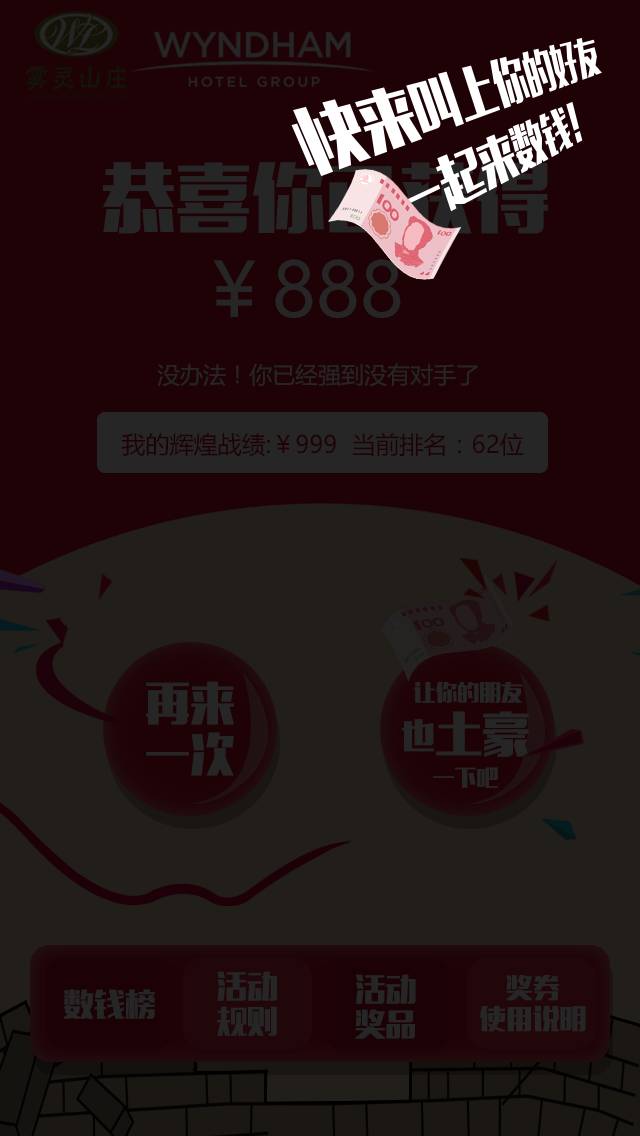
<style>
.page{position:relative;width:640px;height:1136px;background:#1f0206}
.page>*{position:absolute;margin:0}
.t1{font:74.8px "MicrosoftYaHei";color:#262626}
.t2{font:23px "MicrosoftYaHei";color:#262626}
.t3{font:24px "MicrosoftYaHei";color:#1f0206}
.t4{font:45.3px/51.4px "MFLiHei_Noncommercial-Regular";color:#262626}
.t5{font:21.8px "MFLiHei_Noncommercial-Regular";color:#262626}
.t6{font:47.8px "MFLiHei_Noncommercial-Regular";color:#262626}
.t7{font:33.6px "MFLiHei_Noncommercial-Regular";color:#262626}
.t8{font:30.7px/35px "MFLiHei_Noncommercial-Regular";color:#262626}
.t9{font:26.8px/30.5px "MFLiHei_Noncommercial-Regular";color:#262626}
.t10{font:30.7px "MFLiHei_Noncommercial-Regular";color:#262626}
</style>
<div class="page">
<p class="t1" style="left:213px;top:259px;width:188px;height:59px">￥888</p>
<p class="t2" style="left:157px;top:363px;width:321px;height:24px">没办法！你已经强到没有对手了</p>
<p class="t3" style="left:121px;top:432px;width:403px;height:25px">我的辉煌战绩:￥999  当前排名：62位</p>
<p class="t4" style="left:146px;top:681px;width:88px;height:95px">再来<br>一次</p>
<p class="t5" style="left:414px;top:682px;width:109px;height:21px">让你的朋友</p>
<p class="t6" style="left:436px;top:711px;width:93px;height:46px">土豪</p>
<p class="t7" style="left:402px;top:719px;width:32px;height:33px">也</p>
<p class="t5" style="left:433px;top:767px;width:65px;height:21px">一下吧</p>
<p class="t8" style="left:217px;top:971px;width:60px;height:65px;text-align:center">活动<br>规则</p>
<p class="t8" style="left:355px;top:974px;width:61px;height:65px;text-align:center">活动<br>奖品</p>
<p class="t9" style="left:479px;top:975px;width:107px;height:57px;text-align:center">奖券<br>使用说明</p>
<p class="t10" style="left:64px;top:989px;width:91px;height:30px">数钱榜</p>
</div>
